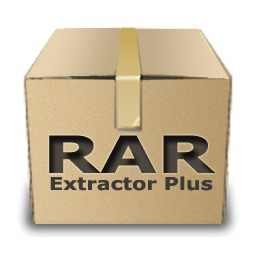
<style>
.page{position:relative;width:256px;height:256px;background:#ffffff}
.page>*{position:absolute;margin:0}
.t1{font:51.6px "Verdana-Bold";color:#3c3936;scale:1.42 1}
.t2{font:17.7px "Verdana-Bold";color:#3c3936;scale:1.17 1}
</style>
<div class="page">
<p class="t1" style="left:49px;top:135px;width:167px;height:38px">RAR</p>
<p class="t2" style="left:50px;top:176px;width:163px;height:15px">Extractor Plus</p>
</div>
